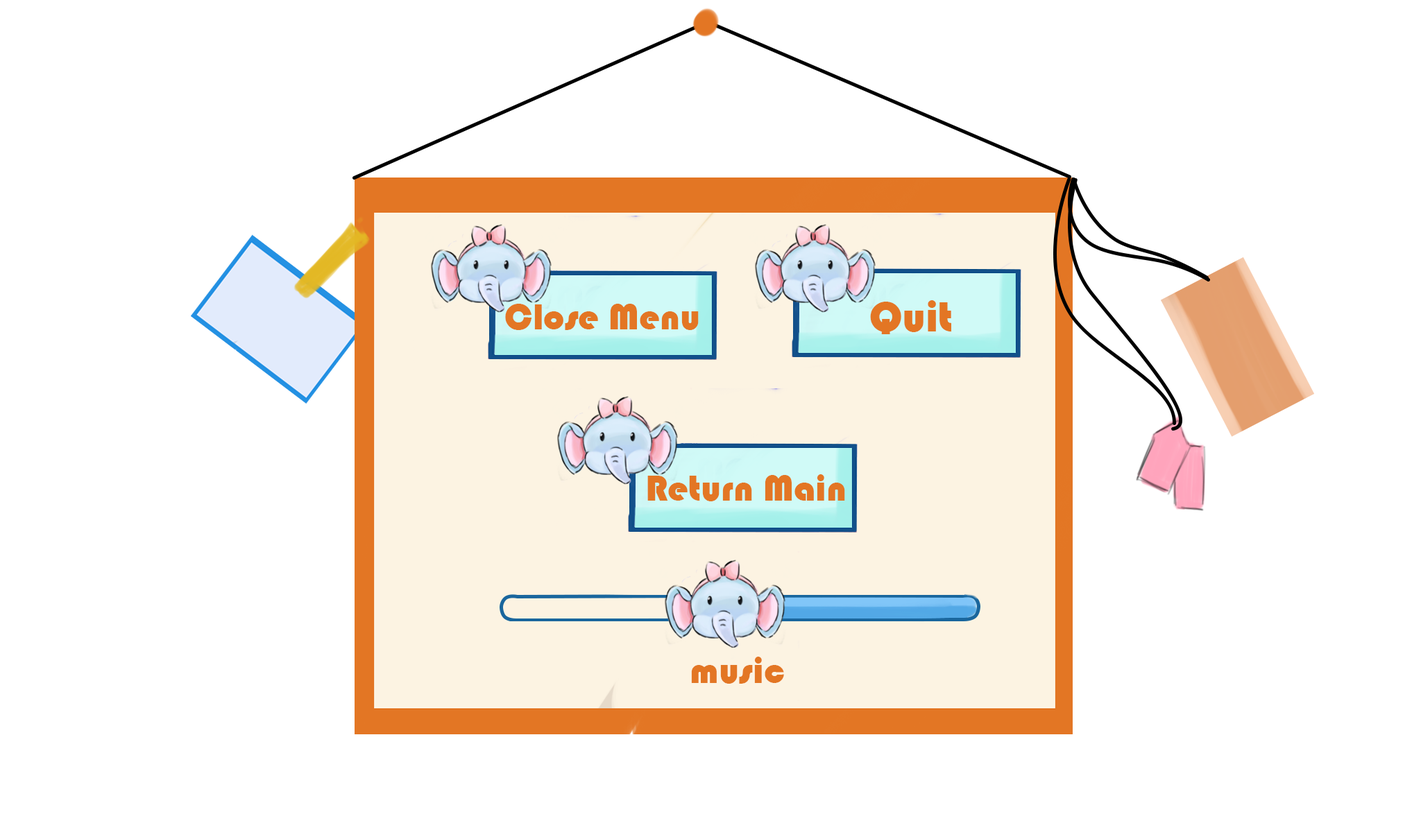
<style>
.page{position:relative;width:1421px;height:839px;background:#ffffff}
.page>*{position:absolute;margin:0}
.t1{font:37.6px "Bauhaus93";color:#e37624}
.t2{font:43.4px "Bauhaus93";color:#e37624}
</style>
<div class="page">
<p class="t1" style="left:505px;top:304px;width:194px;height:26px">Close Menu</p>
<p class="t2" style="left:870px;top:300px;width:81px;height:34px">Quit</p>
<p class="t1" style="left:647px;top:474px;width:198px;height:28px">Return Main</p>
<p class="t1" style="left:691px;top:657px;width:93px;height:27px">music</p>
</div>
